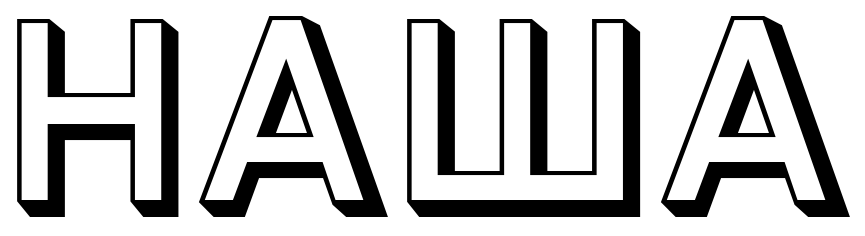
<style>
.page{position:relative;width:865px;height:236px;background:#ffffff}
.page>*{position:absolute;margin:0}
.t1{font:263.5px "GillSansNovaShadowed-Outln";color:#000000}
</style>
<div class="page">
<p class="t1" style="left:17px;top:16px;width:833px;height:201px">Наша</p>
</div>
